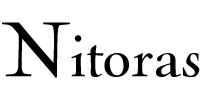
<style>
.page{position:relative;width:200px;height:100px;background:#ffffff}
.page>*{position:absolute;margin:0}
.t1{font:80.8px "NicolasCochinEF";color:#000000;scale:0.97 1}
</style>
<div class="page">
<p class="t1" style="left:2px;top:22px;width:198px;height:56px">Nitoras</p>
</div>
